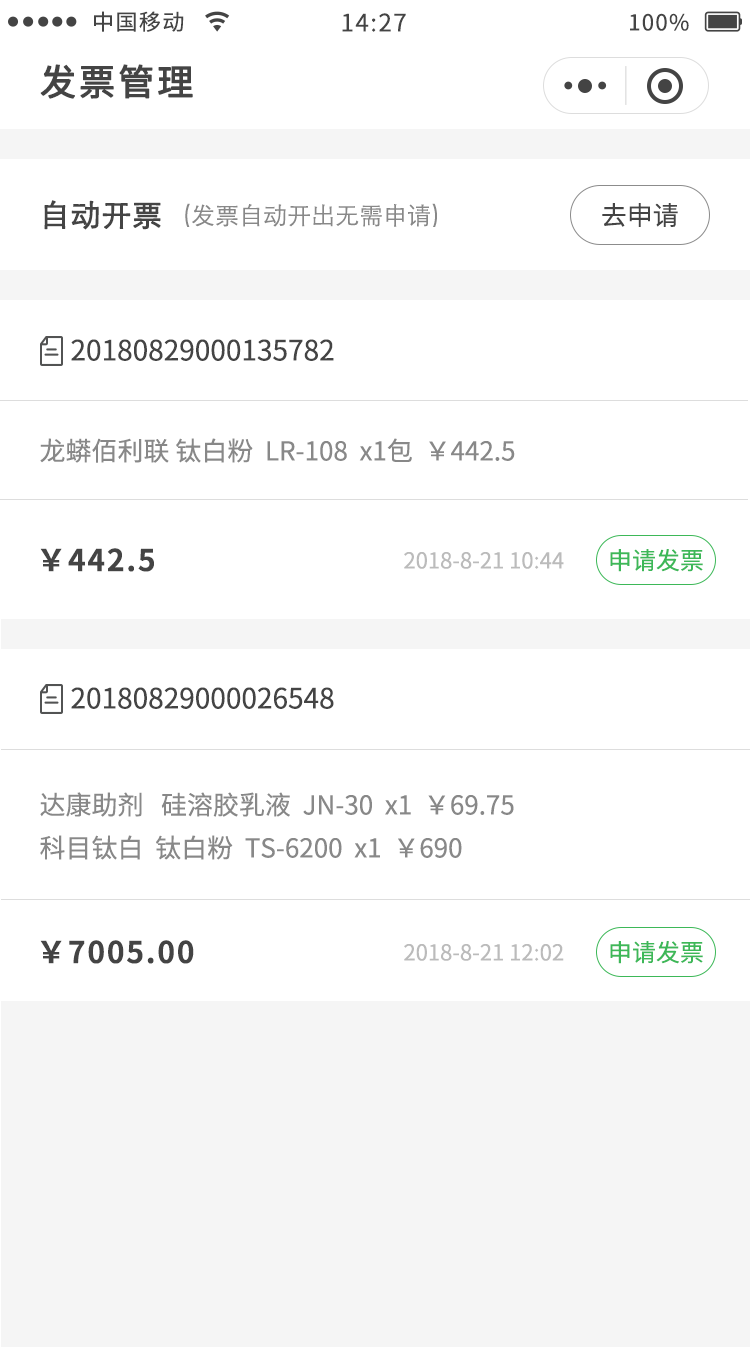
<style>
.page{position:relative;width:750px;height:1347px;background:#ffffff}
.page>*{position:absolute;margin:0}
.t1{font:22px "NotoSansCJKsc-Regular";letter-spacing:0.06em;color:#444444}
.t2{font:24px "NotoSansCJKsc-Regular";letter-spacing:0.06em;color:#444444}
.t3{font:36px "NotoSansCJKsc-Regular";letter-spacing:0.06em;color:#444444;font-weight:bold}
.t4{font:30px "STXihei";color:#444444;font-weight:bold}
.t5{font:24px "STXihei";color:#888888}
.t6{font:26px "NotoSansCJKsc-Regular";color:#444444}
.t7{font:28px "NotoSansCJKsc-Regular";color:#444444}
.t8{font:26px "NotoSansCJKsc-Regular";color:#888888}
.t9{font:30px "NotoSansCJKsc-Bold";letter-spacing:0.06em;color:#444444}
.t10{font:22px "NotoSansCJKsc-Regular";color:#bbbbbb}
.t11{font:24px "NotoSansCJKsc-Regular";color:#3db858}
</style>
<div class="page">
<p class="t1" style="left:94px;top:11px;width:90px;height:21px">中国移动</p>
<p class="t2" style="left:342px;top:13px;width:64px;height:19px">14:27</p>
<p class="t1" style="left:630px;top:13px;width:59px;height:18px">100%</p>
<p class="t3" style="left:40px;top:64px;width:153px;height:35px">发票管理</p>
<p class="t4" style="left:44px;top:200px;width:117px;height:30px">自动开票</p>
<p class="t5" style="left:185px;top:203px;width:252px;height:24px">(发票自动开出无需申请)</p>
<p class="t6" style="left:602px;top:203px;width:76px;height:24px">去申请</p>
<p class="t7" style="left:71px;top:339px;width:263px;height:22px">20180829000135782</p>
<p class="t8" style="left:40px;top:438px;width:475px;height:25px">龙蟒佰利联 钛白粉  LR-108  x1包  ￥442.5</p>
<p class="t9" style="left:40px;top:548px;width:114px;height:24px">￥442.5</p>
<p class="t10" style="left:404px;top:552px;width:160px;height:17px">2018-8-21 10:44</p>
<p class="t11" style="left:610px;top:549px;width:93px;height:23px">申请发票</p>
<p class="t7" style="left:71px;top:687px;width:263px;height:22px">20180829000026548</p>
<p class="t8" style="left:40px;top:792px;width:474px;height:25px">达康助剂   硅溶胶乳液  JN-30  x1  ￥69.75</p>
<p class="t8" style="left:40px;top:835px;width:422px;height:25px">科目钛白  钛白粉  TS-6200  x1  ￥690</p>
<p class="t9" style="left:40px;top:940px;width:154px;height:24px">￥7005.00</p>
<p class="t11" style="left:610px;top:941px;width:93px;height:23px">申请发票</p>
<p class="t10" style="left:404px;top:944px;width:160px;height:17px">2018-8-21 12:02</p>
</div>
